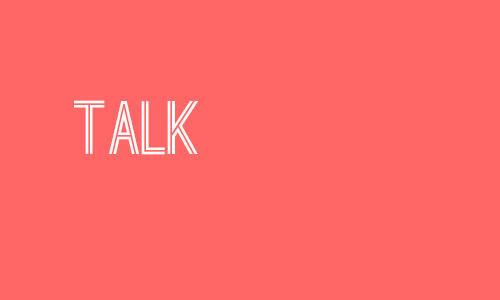
<style>
.page{position:relative;width:500px;height:300px;background:#ff6666}
.page>*{position:absolute;margin:0}
.t1{font:72px "OstrichSans-Bold";color:#fcfcfc}
</style>
<div class="page">
<p class="t1" style="left:74px;top:100px;width:125px;height:55px">TALK</p>
</div>
